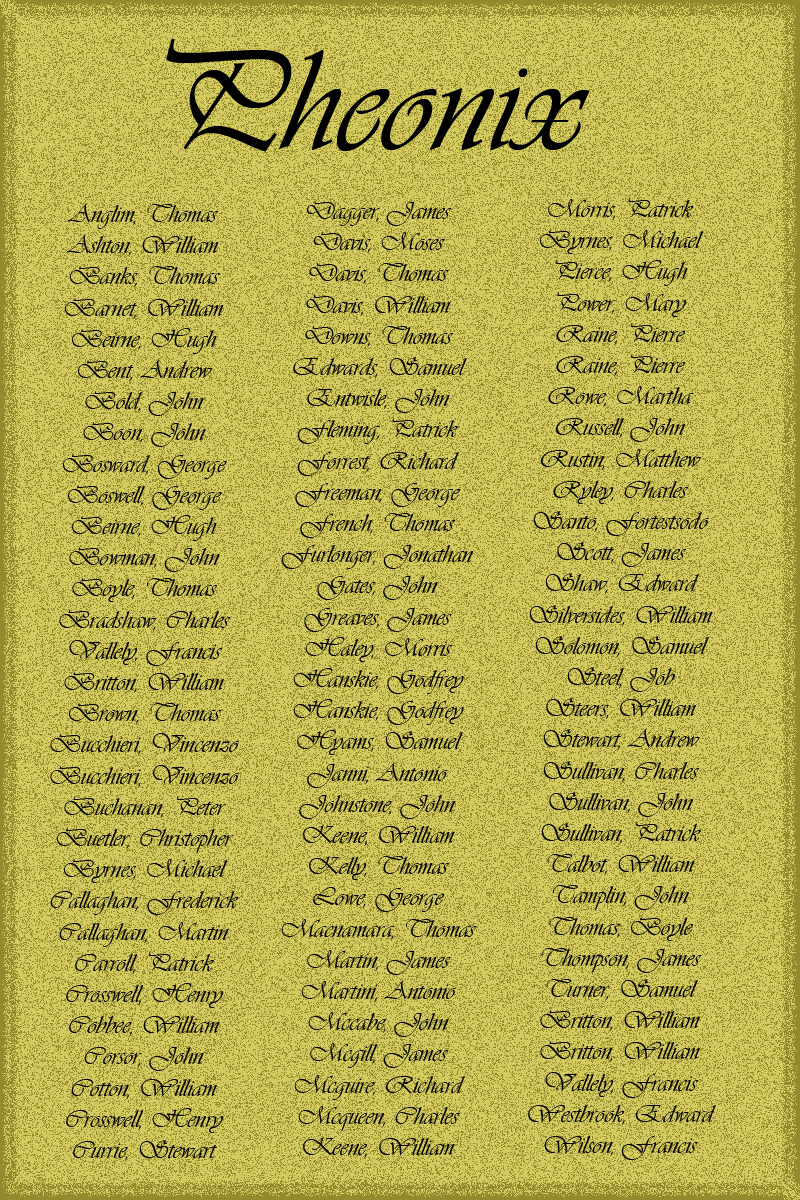
<style>
.page{position:relative;width:800px;height:1200px;background:#d3ca60}
.page>*{position:absolute;margin:0}
.t1{font:150px "Vivaldii";color:#000000}
.t2{font:26px "Vivaldii";color:#000000}
</style>
<div class="page">
<p class="t1" style="left:166px;top:38px;width:424px;height:114px">Pheonix</p>
<p class="t2" style="left:528px;top:198px;width:188px;height:962px;text-align:center">Morris, Patrick<br>Byrnes, Michael<br>Pierce, Hugh<br>Power, Mary<br>Raine, Pierre<br>Raine, Pierre<br>Rowe, Martha<br>Russell, John<br>Rustin, Matthew<br>Ryley, Charles<br>Santo, Fortestsodo<br>Scott, James<br>Shaw, Edward<br>Silversides, William<br>Solomon, Samuel<br>Steel, Job<br>Steers, William<br>Stewart, Andrew<br>Sullivan, Charles<br>Sullivan, John<br>Sullivan, Patrick<br>Talbot, William<br>Tamplin, John<br>Thomas, Boyle<br>Thompson, James<br>Turner, Samuel<br>Britton, William<br>Britton, William<br>Vallely, Francis<br>Westbrook, Edward<br>Wilson, Francis</p>
<p class="t2" style="left:50px;top:203px;width:189px;height:959px;text-align:center">Anglim, Thomas<br>Ashton, William<br>Banks, Thomas<br>Barnet, William<br>Beirne, Hugh<br>Bent, Andrew<br>Bold, John<br>Boon, John<br>Bosward, George<br>Boswell, George<br>Beirne, Hugh<br>Bowman, John<br>Boyle, Thomas<br>Bradshaw, Charles<br>Vallely, Francis<br>Britton, William<br>Brown, Thomas<br>Bucchieri, Vincenzo<br>Bucchieri, Vincenzo<br>Buchanan, Peter<br>Buetler, Christopher<br>Byrnes, Michael<br>Callaghan, Frederick<br>Callaghan, Martin<br>Carroll, Patrick<br>Crosswell, Henry<br>Cobbee, William<br>Corsor, John<br>Cotton, William<br>Crosswell, Henry<br>Currie, Stewart</p>
<p class="t2" style="left:281px;top:200px;width:196px;height:959px;text-align:center">Dagger, James<br>Davis, Moses<br>Davis, Thomas<br>Davis, William<br>Downs, Thomas<br>Edwards, Samuel<br>Entwisle, John<br>Fleming, Patrick<br>Forrest, Richard<br>Freeman, George<br>French, Thomas<br>Furlonger, Jonathan<br>Gates, John<br>Greaves, James<br>Haley, Morris<br>Hanskie, Godfrey<br>Hanskie, Godfrey<br>Hyams, Samuel<br>Janni, Antonio<br>Johnstone, John<br>Keene, William<br>Kelly, Thomas<br>Lowe, George<br>Macnamara, Thomas<br>Martin, James<br>Martini, Antonio<br>Mccabe, John<br>Mcgill, James<br>Mcguire, Richard<br>Mcqueen, Charles<br>Keene, William</p>
</div>
